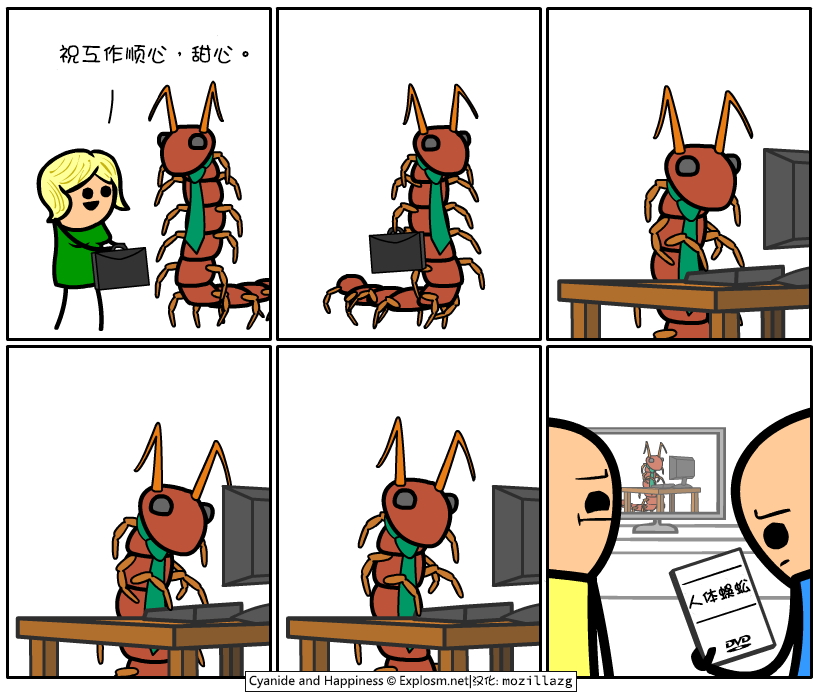
<style>
.page{position:relative;width:820px;height:700px;background:#ffffff}
.page>*{position:absolute;margin:0}
.t1{font:22px "DFGirl";color:#000000}
.t2{font:16px "DFGirl";color:#000000;font-weight:bold}
</style>
<div class="page">
<p class="t1" style="left:59px;top:44px;width:190px;height:20px">祝工作顺心，甜心。</p>
<p class="t2" style="left:689px;top:579px;width:62px;height:30px;rotate:-17deg">人体蜈蚣</p>
</div>
